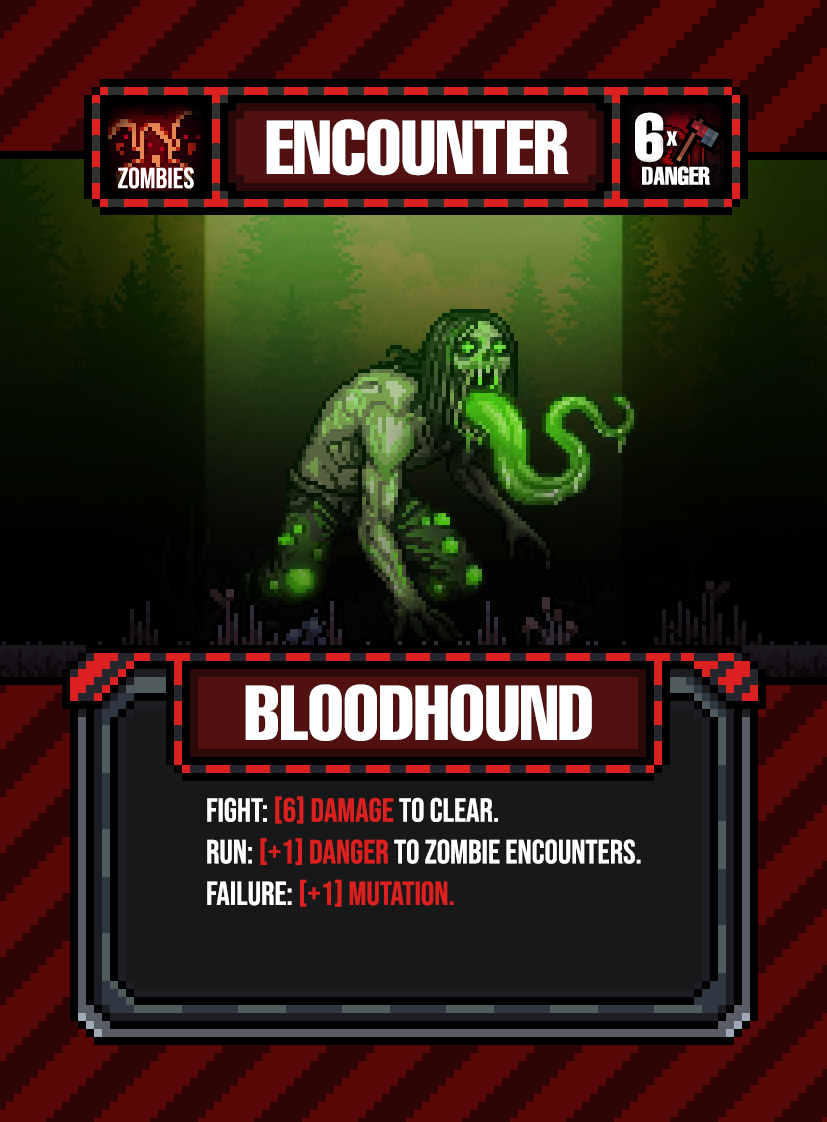
<style>
.page{position:relative;width:827px;height:1122px}
.page>*{position:absolute;margin:0}
.t1{font:75px "HelveticaLTPro-Compressed";color:#ffffff}
.t2{font:76.2px "HelveticaLTPro-Compressed";color:#ffffff}
.t3{font:33.3px/33.3px "BebasNeue-Regular";color:#ffffff}
.t4{font:33.3px/41.7px "BebasNeue-Regular";color:#ffffff}
.t5{font:33.3px/41.7px "BebasNeue-Regular";color:#db201f}
.t6{font:33.3px/33.3px "BebasNeue-Regular";color:#db201f}
</style>
<div class="page">
<p class="t1" style="left:266px;top:119px;width:303px;height:57px">ENCOUNTER</p>
<p class="t2" style="left:245px;top:684px;width:347px;height:57px">BLOODHOUND</p>
<p class="t3" style="left:207px;top:796px;width:434px;height:111px"><span class="t4">FIGHT: </span><span class="t5">[6] Damage</span><span class="t4"> to clear.<br>RUN: </span><span class="t6">[+1] Danger </span>to zombie encounters.<br><span class="t4">failure: </span><span class="t5">[+1] MUTATION.</span></p>
</div>
